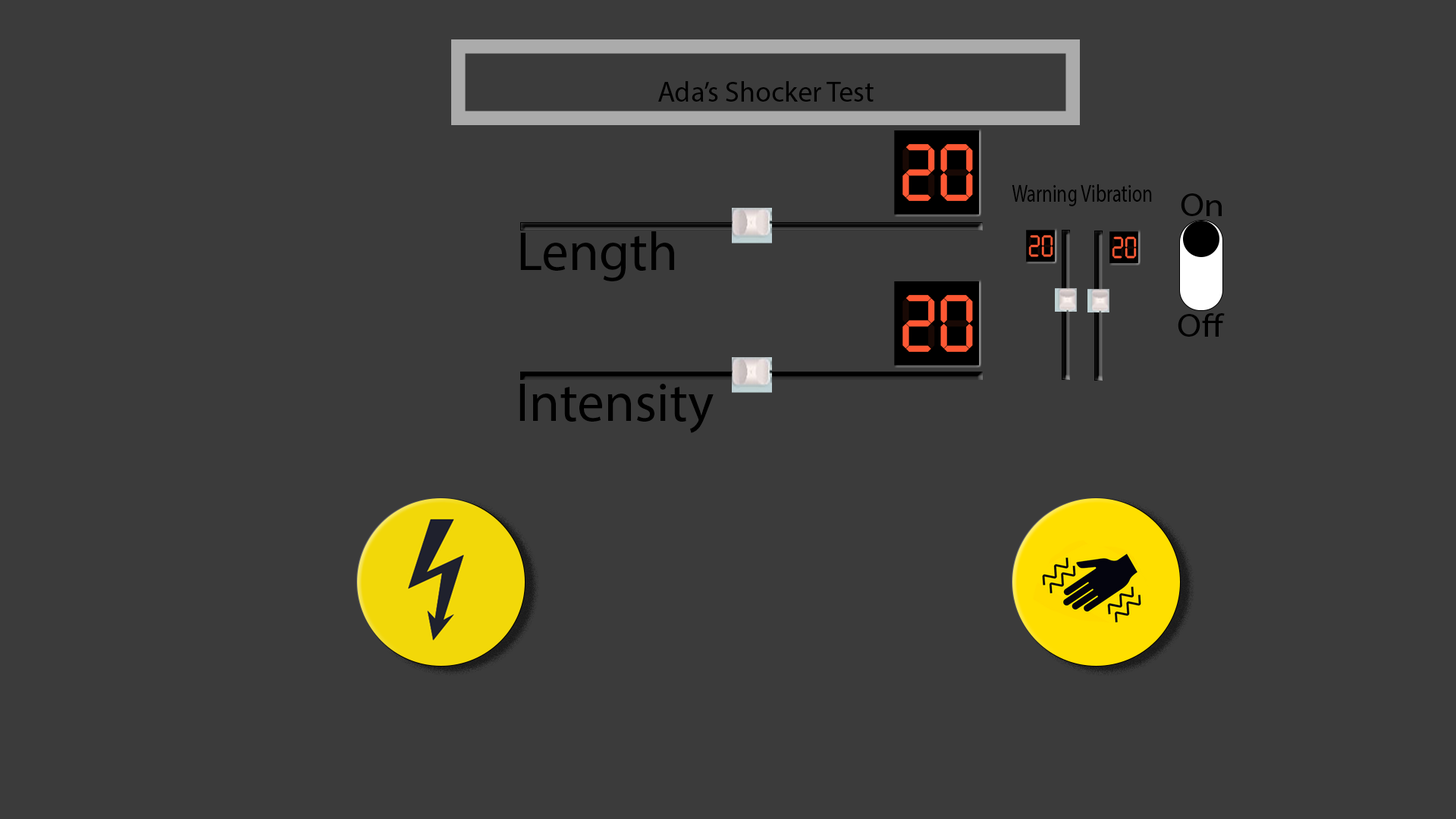
<style>
.page{position:relative;width:1456px;height:819px;background:#3b3b3b}
.page>*{position:absolute;margin:0}
.t1{font:28.8px "MyriadPro-Regular";color:#000000}
.t2{font:24.3px "MyriadPro-Regular";color:#000000;scale:0.77 1}
.t3{font:32.8px "MyriadPro-Regular";color:#000000;scale:1.09 1}
.t4{font:54.6px "MyriadPro-Regular";color:#000000}
</style>
<div class="page">
<p class="t1" style="left:658px;top:81px;width:216px;height:21px">Ada’s Shocker Test</p>
<p class="t2" style="left:1012px;top:184px;width:140px;height:22px">Warning Vibration</p>
<p class="t3" style="left:1181px;top:193px;width:41px;height:23px">On</p>
<p class="t4" style="left:520px;top:231px;width:154px;height:50px">Length</p>
<p class="t3" style="left:1178px;top:313px;width:47px;height:24px">Off</p>
<p class="t4" style="left:519px;top:384px;width:195px;height:49px">Intensity</p>
</div>
